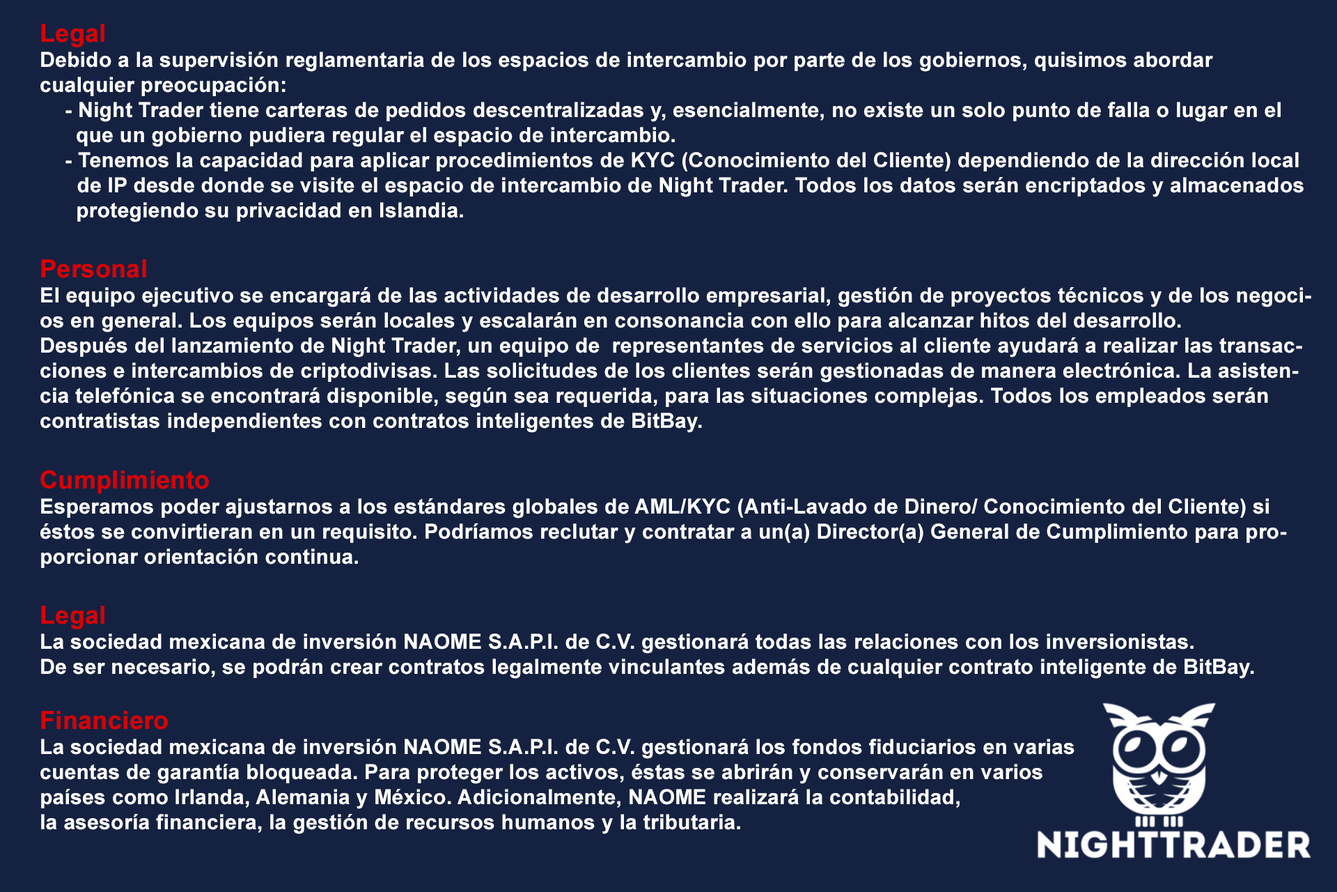
<style>
.page{position:relative;width:1337px;height:892px;background:#142141}
.page>*{position:absolute;margin:0}
.t1{font:20.9px "Arial-BoldMT";letter-spacing:0.01em;color:#ffffff}
.t2{font:25.1px "Arial-BoldMT";letter-spacing:0.01em;color:#db0000}
</style>
<div class="page">
<p class="t1" style="left:40px;top:24px;width:1272px;height:810px"><span class="t2">Legal</span><br>Debido a la supervisión reglamentaria de los espacios de intercambio por parte de los gobiernos, quisimos abordar<br>cualquier preocupación:<br> - Night Trader tiene carteras de pedidos descentralizadas y, esencialmente, no existe un solo punto de falla o lugar en el  <br>      que un gobierno pudiera regular el espacio de intercambio.<br> - Tenemos la capacidad para aplicar procedimientos de KYC (Conocimiento del Cliente) dependiendo de la dirección local <br>   de IP desde donde se visite el espacio de intercambio de Night Trader. Todos los datos serán encriptados y almacenados <br>      protegiendo su privacidad en Islandia.<br><br><span class="t2">Personal<br></span>El equipo ejecutivo se encargará de las actividades de desarrollo empresarial, gestión de proyectos técnicos y de los negocios en general. Los equipos serán locales y escalarán en consonancia con ello para alcanzar hitos del desarrollo.<br>Después del lanzamiento de Night Trader, un equipo de  representantes de servicios al cliente ayudará a realizar las transacciones e intercambios de criptodivisas. Las solicitudes de los clientes serán gestionadas de manera electrónica. La asistencia telefónica se encontrará disponible, según sea requerida, para las situaciones complejas. Todos los empleados serán contratistas independientes con contratos inteligentes de BitBay.<br><br><span class="t2">Cumplimiento<br></span>Esperamos poder ajustarnos a los estándares globales de AML/KYC (Anti-Lavado de Dinero/ Conocimiento del Cliente) si éstos se convirtieran en un requisito. Podríamos reclutar y contratar a un(a) Director(a) General de Cumplimiento para proporcionar orientación continua. <br><br><span class="t2">Legal<br></span>La sociedad mexicana de inversión NAOME S.A.P.I. de C.V. gestionará todas las relaciones con los inversionistas. <br>De ser necesario, se podrán crear contratos legalmente vinculantes además de cualquier contrato inteligente de BitBay.<br><br><span class="t2">Financiero<br></span>La sociedad mexicana de inversión NAOME S.A.P.I. de C.V. gestionará los fondos fiduciarios en varias<br>cuentas de garantía bloqueada. Para proteger los activos, éstas se abrirán y conservarán en varios<br>países como Irlanda, Alemania y México. Adicionalmente, NAOME realizará la contabilidad,<br>la asesoría financiera, la gestión de recursos humanos y la tributaria.</p>
</div>
